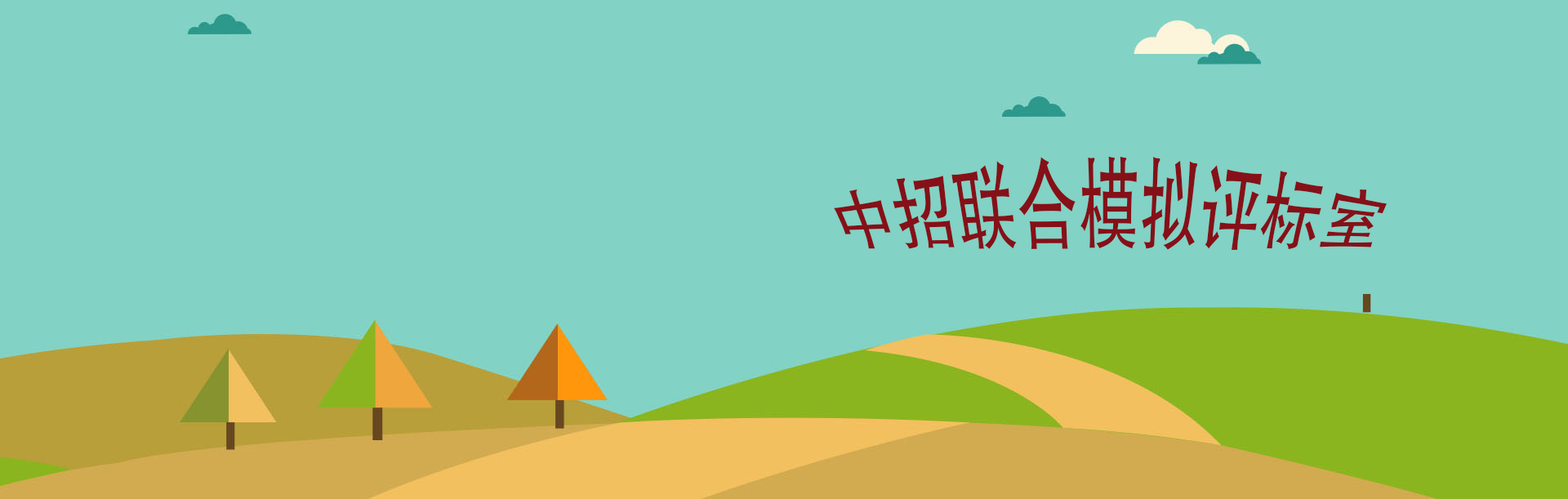
<style>
.page{position:relative;width:1568px;height:499px;background:#82d2c5}
.page>*{position:absolute;margin:0}
.t1{font:58.8px "AdobeHeitiStd-Regular";color:#861018}
</style>
<div class="page">
<p class="t1" style="left:834px;top:156px;width:553px;height:94px">中招联合模拟评标室</p>
</div>
